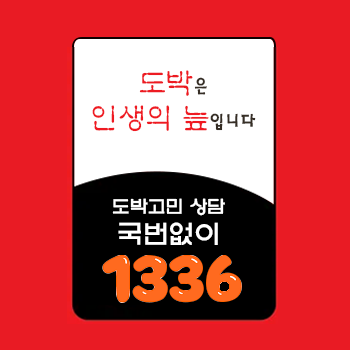
<style>
.page{position:relative;width:350px;height:350px;background:#e91b24}
.page>*{position:absolute;margin:0}
.t1{font:28px/35px "YJ-INJANG-Medium";letter-spacing:-0.03em;color:#ef1a22}
.t2{font:28px/35px "YJ-INJANG-Medium";letter-spacing:-0.03em;color:#ed1b22}
.t3{font:20px/35px "HaanSaleM";letter-spacing:-0.03em;color:#362e25}
.t4{font:18px "Yj-TEUNTEUN--Bold";letter-spacing:-0.03em;color:#ffffff}
.t5{font:26px "Yj-TEUNTEUN--Bold";letter-spacing:-0.03em;color:#ffffff}
</style>
<div class="page">
<p class="t1" style="left:92px;top:70px;width:164px;height:62px;text-align:center"><span class="t2">도박</span><span class="t3">은<br></span>인생의 늪<span class="t3">입니다</span></p>
<p class="t4" style="left:112px;top:198px;width:113px;height:18px">도박고민 상담</p>
<p class="t5" style="left:118px;top:222px;width:100px;height:23px">국번없이</p>
</div>
